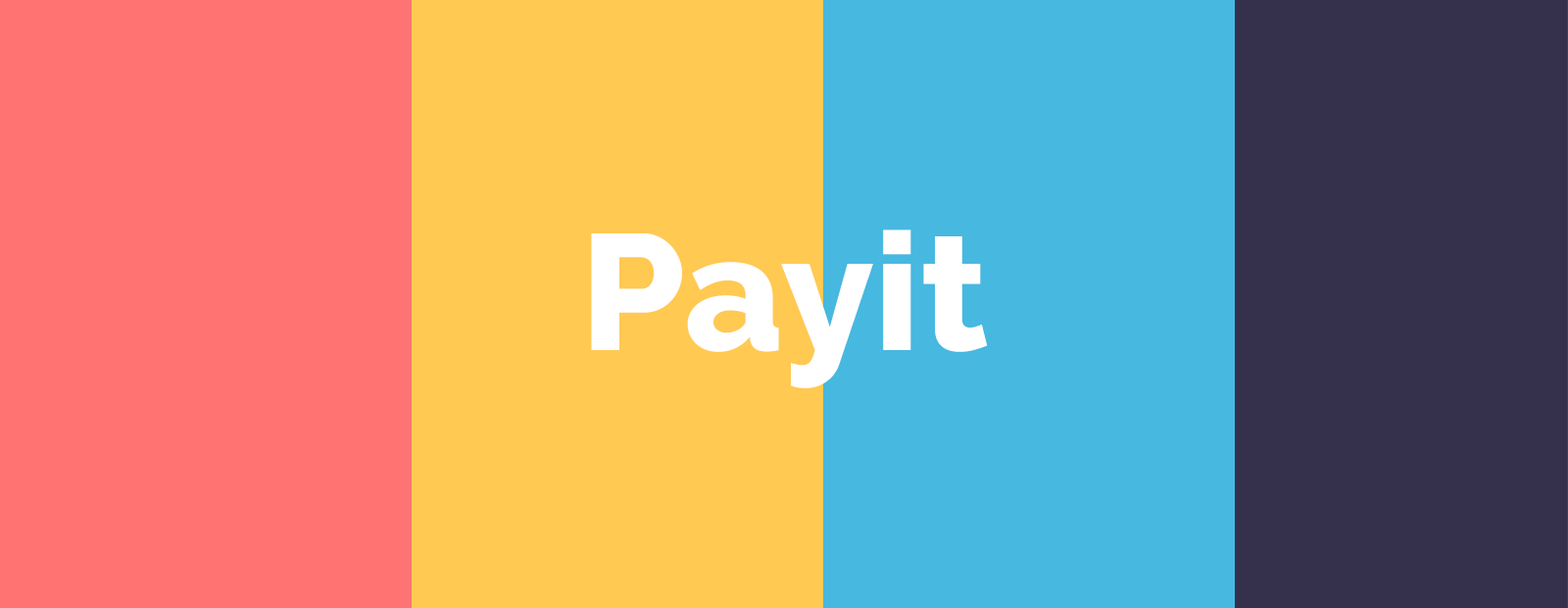
<style>
.page{position:relative;width:1568px;height:608px;background:#ff7473}
.page>*{position:absolute;margin:0}
.t1{font:164.2px "Raleway-ExtraBold";color:#ffffff}
</style>
<div class="page">
<p class="t1" style="left:591px;top:229px;width:397px;height:159px">Payit</p>
</div>
